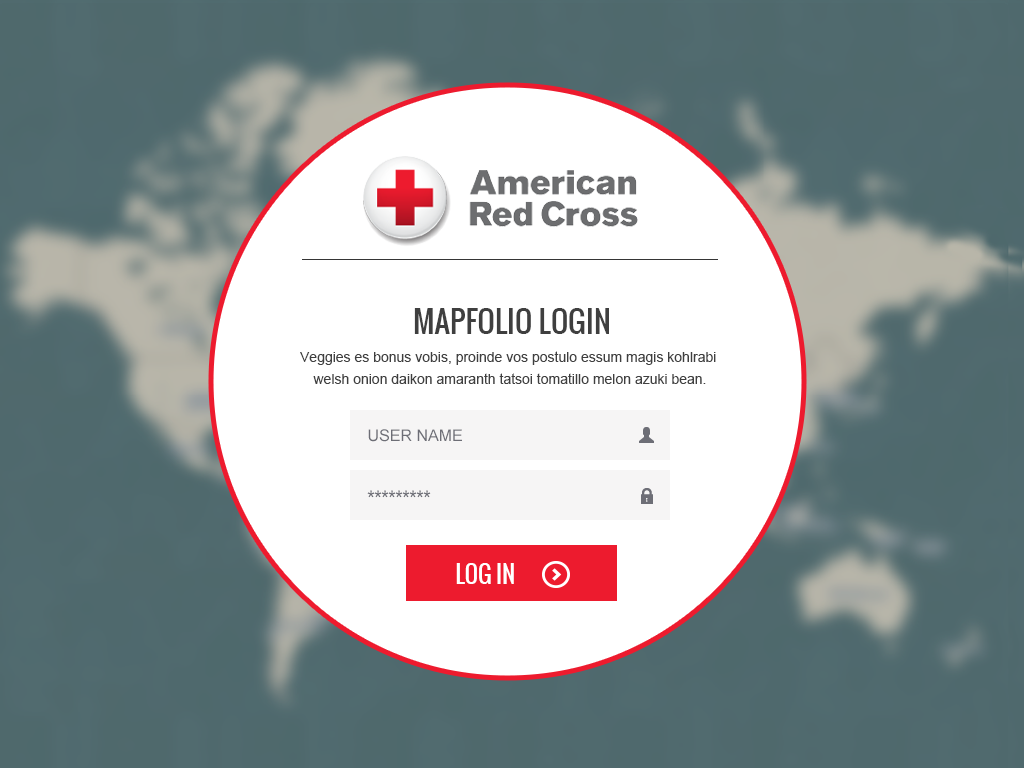
<style>
.page{position:relative;width:1024px;height:768px;background:#ffffff}
.page>*{position:absolute;margin:0}
.t1{font:30.2px "Oswald-Regular";color:#3f3f3f}
.t2{font:14px/22px "ArialMT";color:#3f3f3f}
.t3{font:16px "ArialMT";color:#6d6e76}
.t4{font:16px "Roboto-Medium";color:#6d6e76}
.t5{font:23px "Oswald-Regular";color:#ffffff}
</style>
<div class="page">
<p class="t1" style="left:414px;top:308px;width:195px;height:26px">MAPFOLIO LOGIN</p>
<p class="t2" style="left:300px;top:351px;width:416px;height:33px;text-align:center">Veggies es bonus vobis, proinde vos postulo essum magis kohlrabi <br>welsh onion daikon amaranth tatsoi tomatillo melon azuki bean.</p>
<p class="t3" style="left:368px;top:429px;width:94px;height:13px">USER NAME</p>
<p class="t4" style="left:367px;top:490px;width:64px;height:8px">*********</p>
<p class="t5" style="left:456px;top:563px;width:58px;height:21px">LOG IN</p>
</div>
